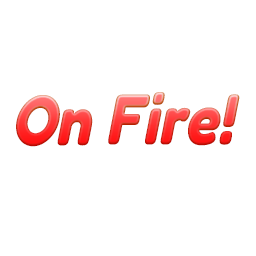
<style>
.page{position:relative;width:256px;height:256px;background:#ffffff}
.page>*{position:absolute;margin:0}
.t1{font:72.8px "Fredoka-Bold";scale:0.84 1}
</style>
<div class="page">
<p class="t1" style="left:16px;top:92px;width:224px;height:55px">On Fire!</p>
</div>
